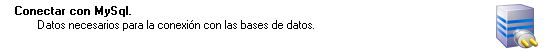
<style>
.page{position:relative;width:552px;height:52px;background:#ffffff}
.page>*{position:absolute;margin:0}
.t1{font:11.4px "MS Sans Serif";color:#000000;font-weight:bold}
.t2{font:11.4px "MS Sans Serif";color:#000000}
</style>
<div class="page">
<p class="t1" style="left:15px;top:6px;width:116px;height:11px">Conectar con MySql.</p>
<p class="t2" style="left:38px;top:20px;width:276px;height:11px">Datos necesarios para la conexión con las bases de datos.</p>
</div>
